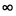
<style>
.page{position:relative;width:16px;height:16px;background:#ffffff}
.page>*{position:absolute;margin:0}
.t1{font:18px "Arial-BoldMT";color:#000000}
</style>
<div class="page">
<p class="t1" style="left:2px;top:4px;width:11px;height:7px">∞</p>
</div>
